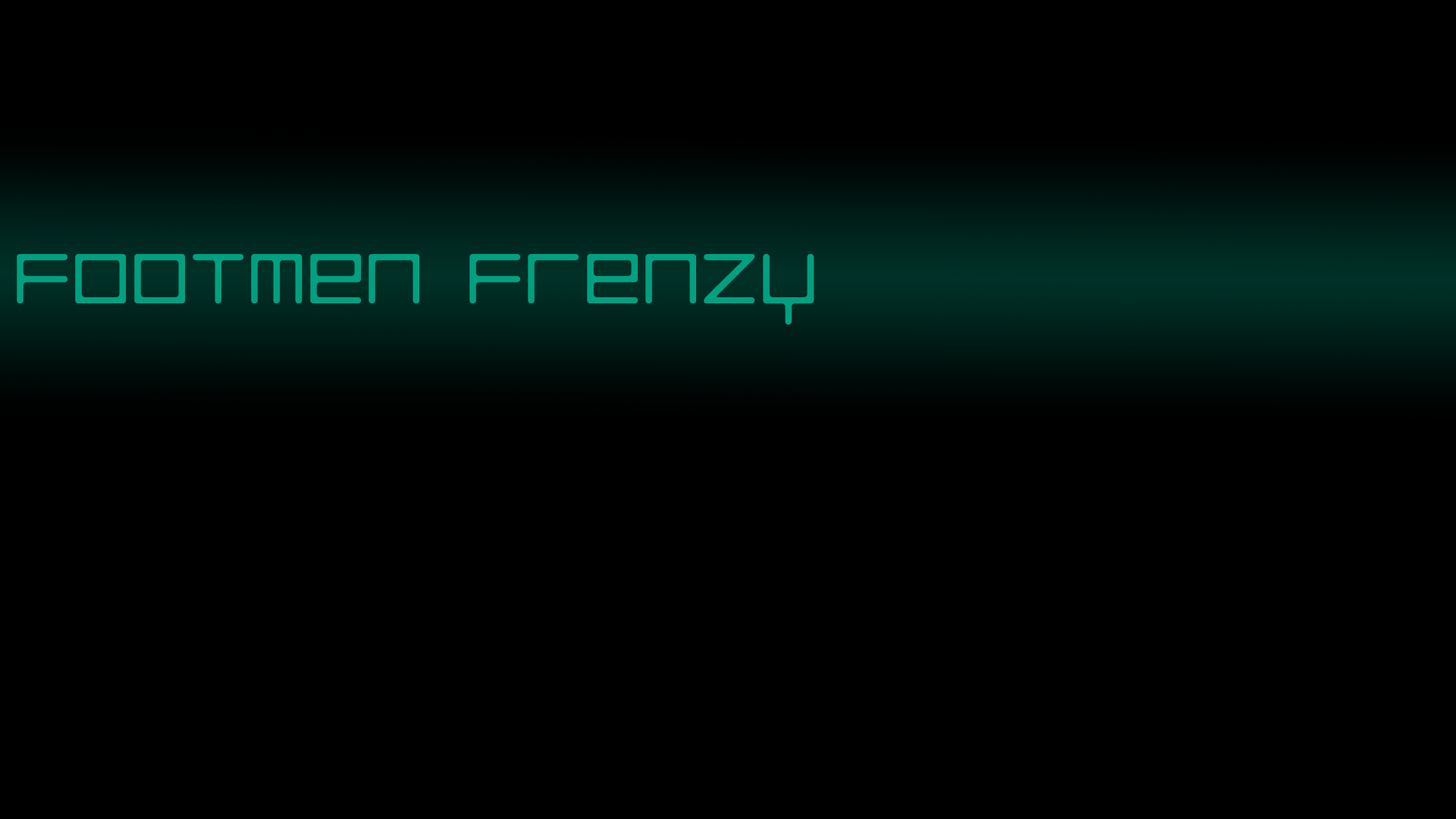
<style>
.page{position:relative;width:1456px;height:819px;background:#000000}
.page>*{position:absolute;margin:0}
.t1{font:91px "LuggageRoundLight";color:#01a080}
</style>
<div class="page">
<p class="t1" style="left:17px;top:254px;width:797px;height:71px">Footmen Frenzy</p>
</div>
